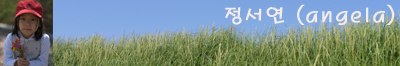
<style>
.page{position:relative;width:400px;height:66px}
.page>*{position:absolute;margin:0}
.t1{font:20px "H2porM";letter-spacing:0.025em;color:#f3ece6;font-weight:bold}
</style>
<div class="page">
<p class="t1" style="left:225px;top:4px;width:170px;height:21px">정서연 (angela)</p>
</div>
